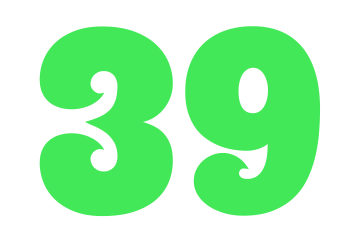
<style>
.page{position:relative;width:354px;height:236px;background:#ffffff}
.page>*{position:absolute;margin:0}
.t1{font:250px "SpicyRice-Regular";color:#43e858}
</style>
<div class="page">
<p class="t1" style="left:39px;top:26px;width:282px;height:191px">39</p>
</div>
